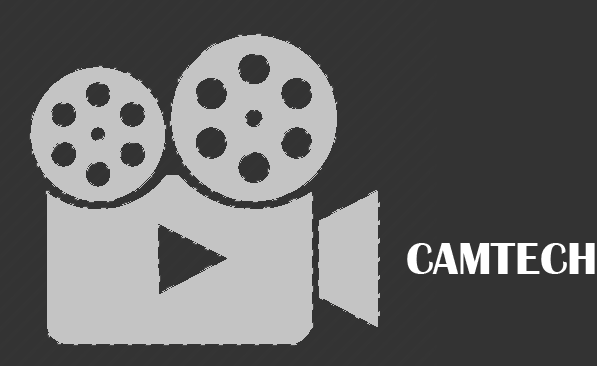
<style>
.page{position:relative;width:597px;height:366px;background:#333333}
.page>*{position:absolute;margin:0}
.t1{font:45.8px "BritannicBold";color:#ffffff}
</style>
<div class="page">
<p class="t1" style="left:407px;top:243px;width:188px;height:31px">CAMTECH</p>
</div>
